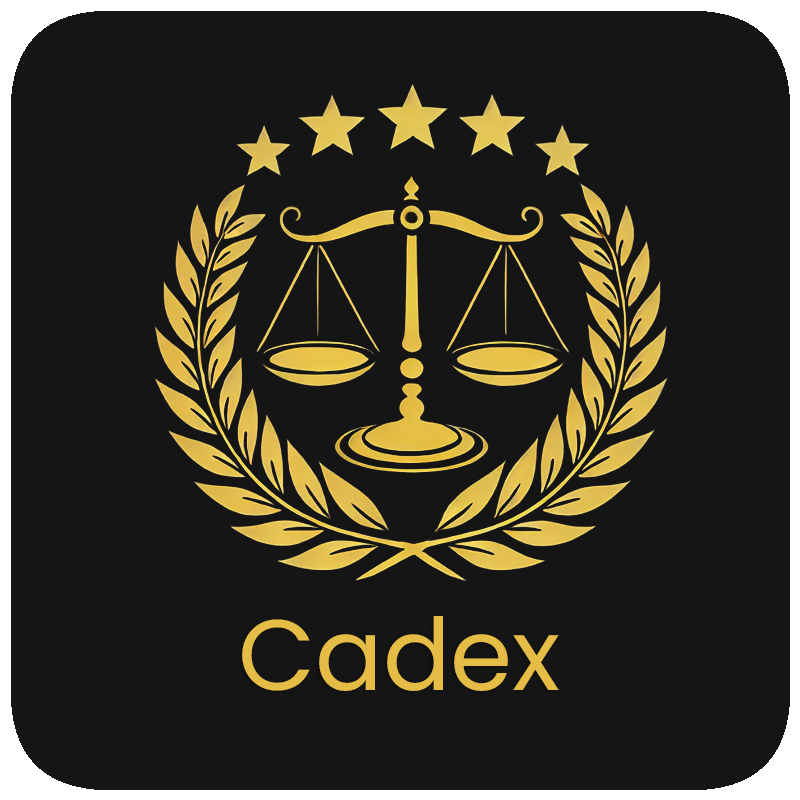
<style>
.page{position:relative;width:800px;height:800px;background:#151515}
.page>*{position:absolute;margin:0}
.t1{font:100px "Poppins-Regular";color:#e5bd46}
</style>
<div class="page">
<p class="t1" style="left:242px;top:616px;width:317px;height:75px">Cadex</p>
</div>
